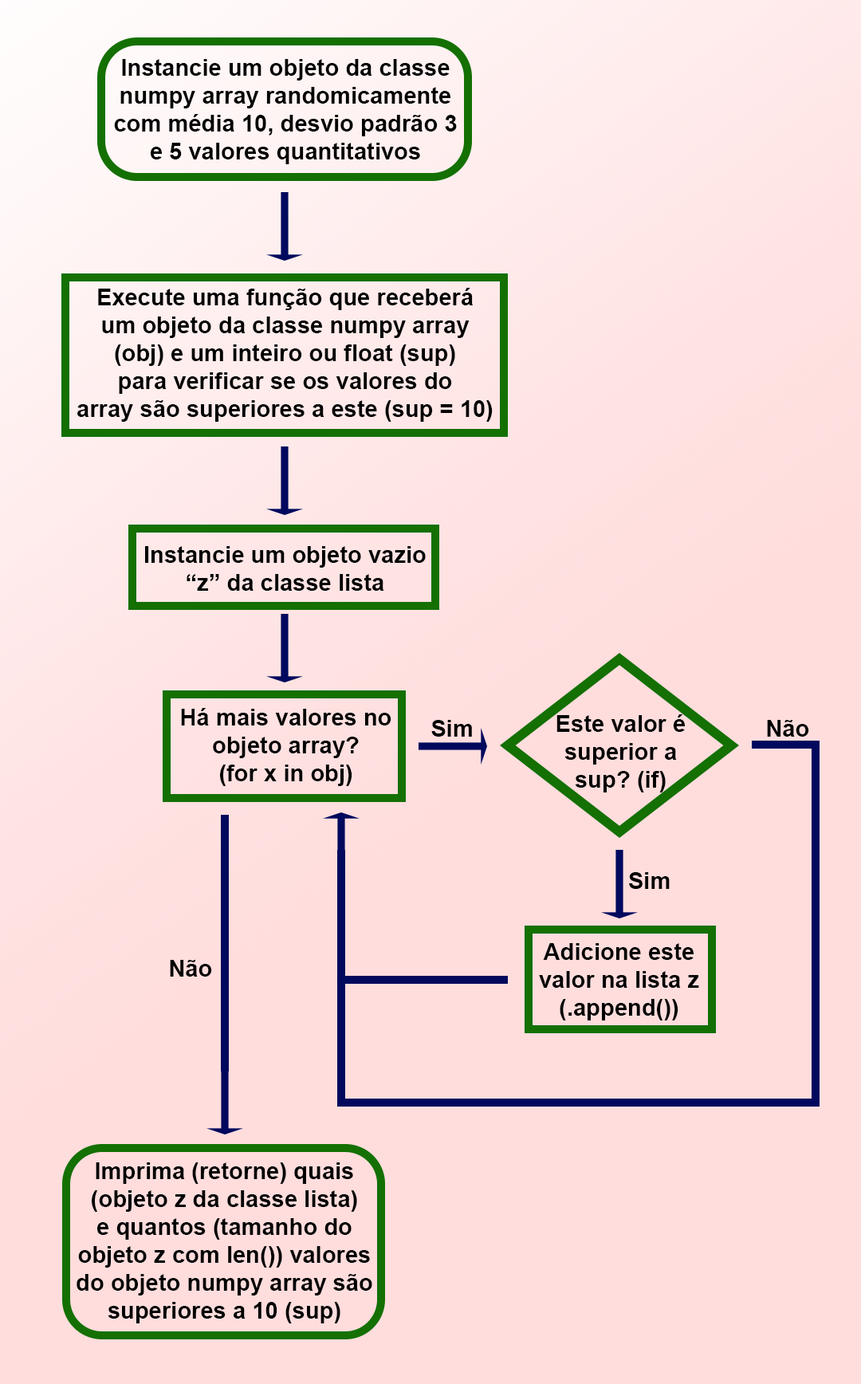
<style>
.page{position:relative;width:861px;height:1384px;background:#ffdddd}
.page>*{position:absolute;margin:0}
.t1{font:23.3px "Arial-BoldMT";color:#000000}
</style>
<div class="page">
<p class="t1" style="left:114px;top:59px;width:343px;height:105px;text-align:center">Instancie um objeto da classe<br>numpy array randomicamente<br>com média 10, desvio padrão 3<br>e 5 valores quantitativos</p>
<p class="t1" style="left:77px;top:288px;width:416px;height:134px;text-align:center">Execute uma função que receberá<br>um objeto da classe numpy array<br>(obj) e um inteiro ou float (sup)<br>para verificar se os valores do<br>array são superiores a este (sup = 10)</p>
<p class="t1" style="left:145px;top:546px;width:281px;height:45px;text-align:center">Instancie um objeto vazio<br>“z” da classe lista</p>
<p class="t1" style="left:181px;top:708px;width:211px;height:78px;text-align:center">Há mais valores no<br>objeto array?<br>(for x in obj)</p>
<p class="t1" style="left:431px;top:720px;width:41px;height:17px">Sim</p>
<p class="t1" style="left:557px;top:715px;width:128px;height:78px;text-align:center">Este valor é<br>superior a<br>sup? (if)</p>
<p class="t1" style="left:767px;top:720px;width:42px;height:17px">Não</p>
<p class="t1" style="left:629px;top:872px;width:41px;height:17px">Sim</p>
<p class="t1" style="left:539px;top:943px;width:160px;height:78px;text-align:center">Adicione este<br>valor na lista z<br>(.append())</p>
<p class="t1" style="left:170px;top:960px;width:42px;height:17px">Não</p>
<p class="t1" style="left:77px;top:1163px;width:295px;height:161px;text-align:center">Imprima (retorne) quais<br>(objeto z da classe lista)<br>e quantos (tamanho do<br>objeto z com len()) valores<br>do objeto numpy array são<br>superiores a 10 (sup)</p>
</div>
